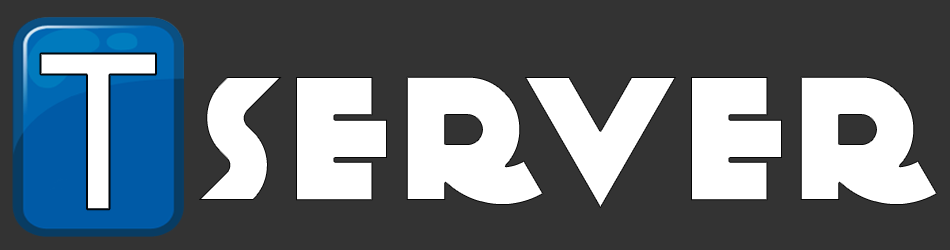
<style>
.page{position:relative;width:950px;height:250px;background:#333333}
.page>*{position:absolute;margin:0}
.t1{font:220px "Code-Bold";color:#ffffff}
.t2{font:180px "KiloGram";letter-spacing:0.08em;color:#ffffff}
.t3{font:180px "KiloGram";letter-spacing:-0.1em;color:#ffffff}
</style>
<div class="page">
<p class="t1" style="left:40px;top:53px;width:116px;height:157px">t</p>
<p class="t2" style="left:199px;top:76px;width:739px;height:132px">se<span class="t3">r</span>ver</p>
</div>
